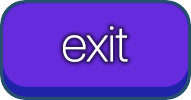
<style>
.page{position:relative;width:191px;height:100px;background:#652bdc}
.page>*{position:absolute;margin:0}
.t1{font:50px "SFProDisplay-Thin";letter-spacing:-0.04em;color:#ffffff;font-weight:bold}
</style>
<div class="page">
<p class="t1" style="left:63px;top:26px;width:65px;height:36px">exit</p>
</div>
